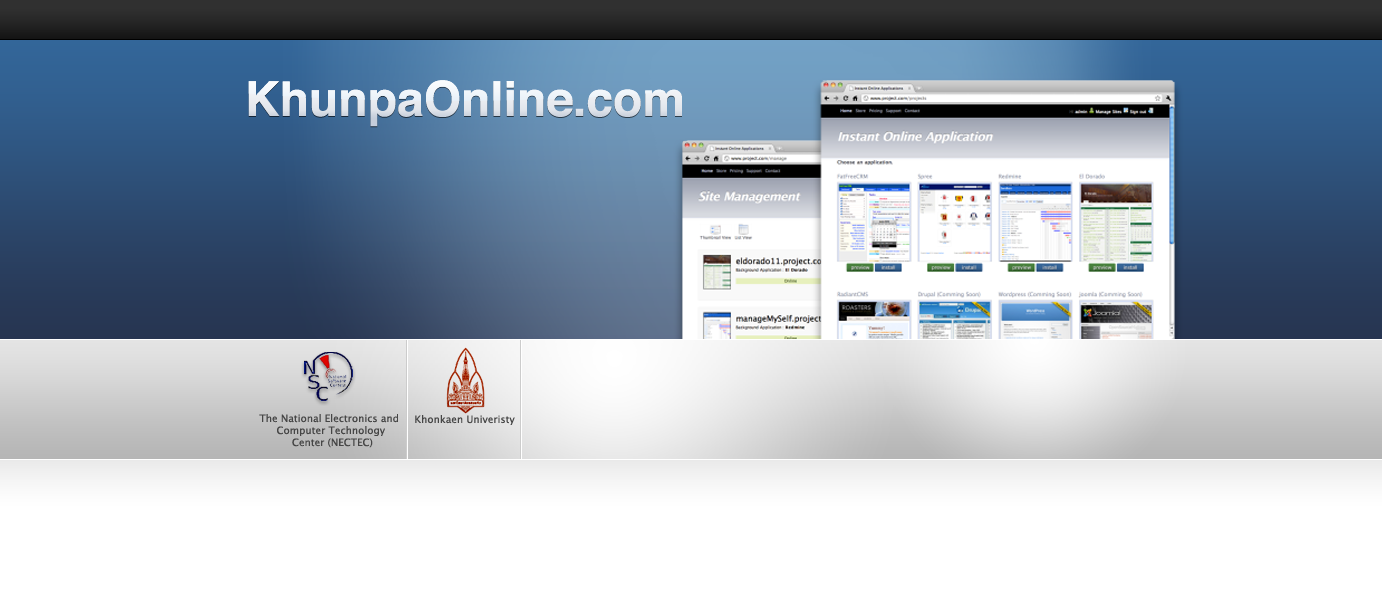
<style>
.page{position:relative;width:1382px;height:598px}
.page>*{position:absolute;margin:0}
.t1{font:48px "Helvetica-Bold";color:#e8ebf0}
.t2{font:10px "LucidaSans";letter-spacing:0.005em;color:#464646}
</style>
<div class="page">
<p class="t1" style="left:248px;top:80px;width:434px;height:47px">KhunpaOnline.com</p>
<p class="t2" style="left:259px;top:414px;width:139px;height:34px;text-align:center">The National Electronics and  <br>Computer Technology <br>Center (NECTEC)</p>
<p class="t2" style="left:415px;top:415px;width:100px;height:10px">Khonkaen Univeristy</p>
</div>
